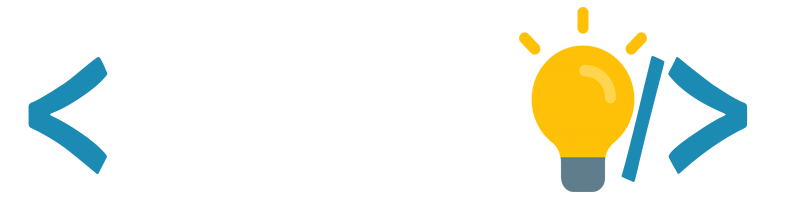
<style>
.page{position:relative;width:800px;height:200px;background:#ffffff}
.page>*{position:absolute;margin:0}
.t1{font:254px "BerlinSansFB-Reg";color:#1c8cb4}
.t2{font:169.3px "BerlinSansFB-Reg";color:#1c8cb4}
</style>
<div class="page">
<p class="t1" style="left:28px;top:56px;width:720px;height:118px">&lt;         &gt;</p>
<p class="t2" style="left:621px;top:56px;width:44px;height:126px">/</p>
</div>
